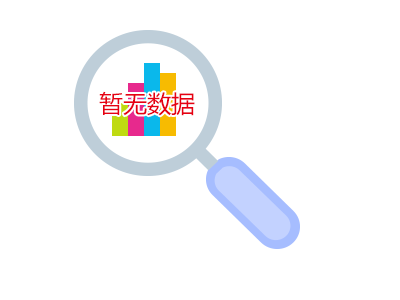
<style>
.page{position:relative;width:400px;height:300px;background:#ffffff}
.page>*{position:absolute;margin:0}
.t1{font:24px "MicrosoftYaHei";color:#e60012}
</style>
<div class="page">
<p class="t1" style="left:99px;top:91px;width:96px;height:25px">暂无数据</p>
</div>
